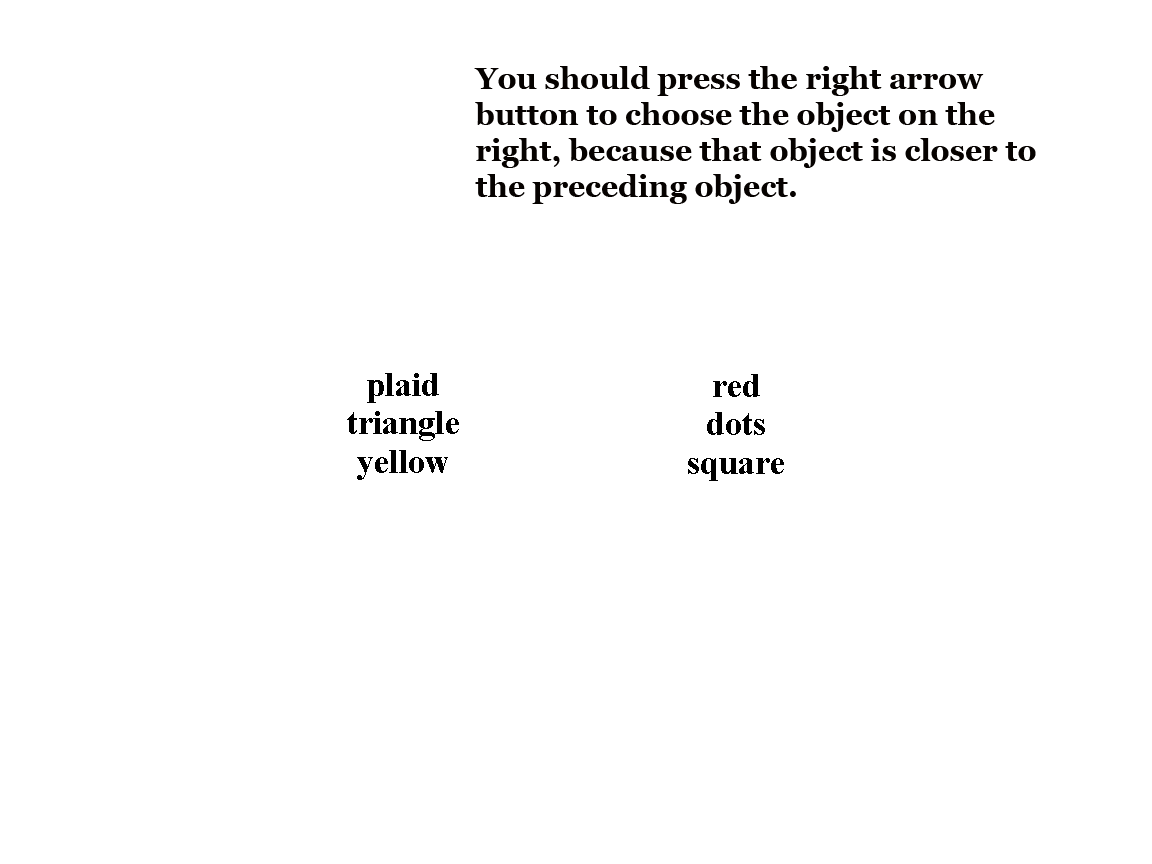
<style>
.page{position:relative;width:1152px;height:864px;background:#ffffff}
.page>*{position:absolute;margin:0}
.t1{font:30px "Georgia-Bold";color:#060200}
</style>
<div class="page">
<p class="t1" style="left:474px;top:66px;width:562px;height:138px">You should press the right arrow button to choose the object on the right, because that object is closer to the preceding object.</p>
</div>
